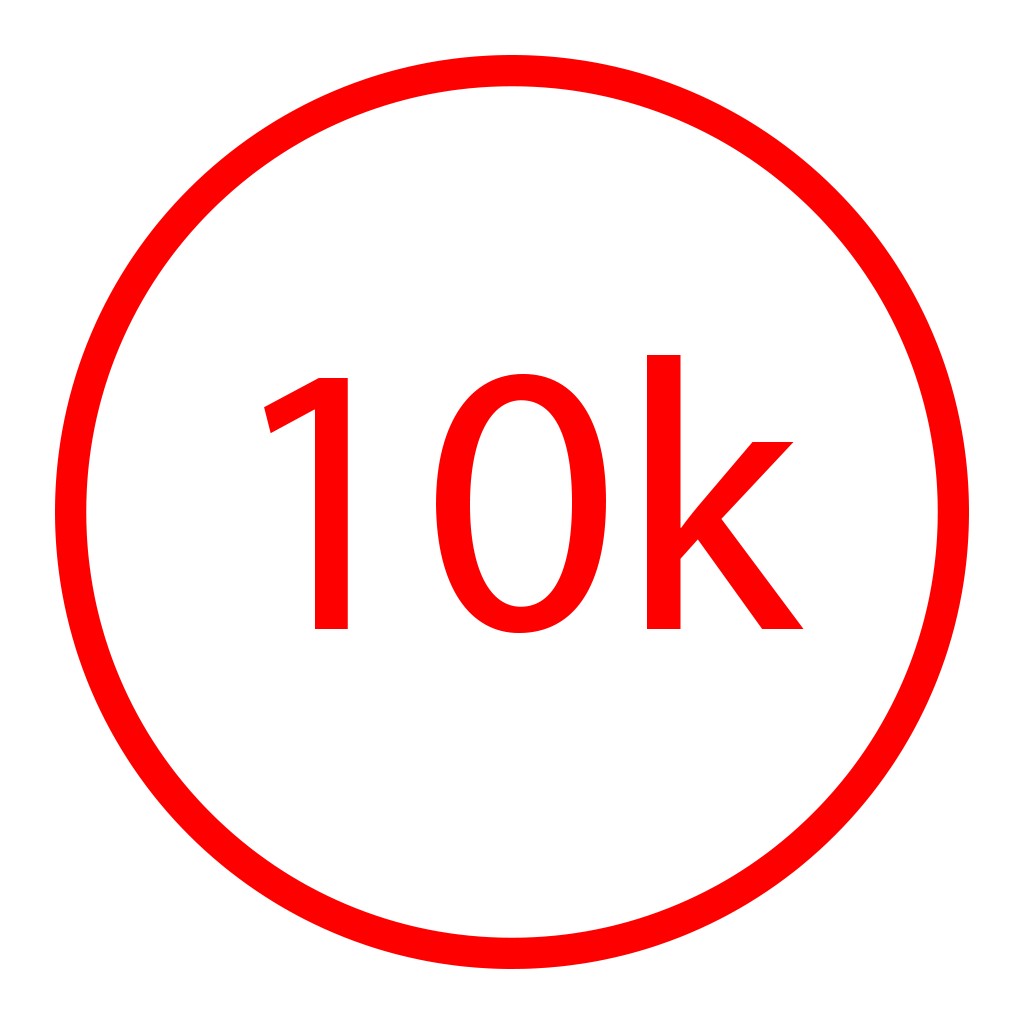
<style>
.page{position:relative;width:1024px;height:1024px;background:#ffffff}
.page>*{position:absolute;margin:0}
.t1{font:385.4px "MyriadPro-Regular";color:#ff0000}
</style>
<div class="page">
<p class="t1" style="left:264px;top:355px;width:540px;height:278px">10k</p>
</div>
